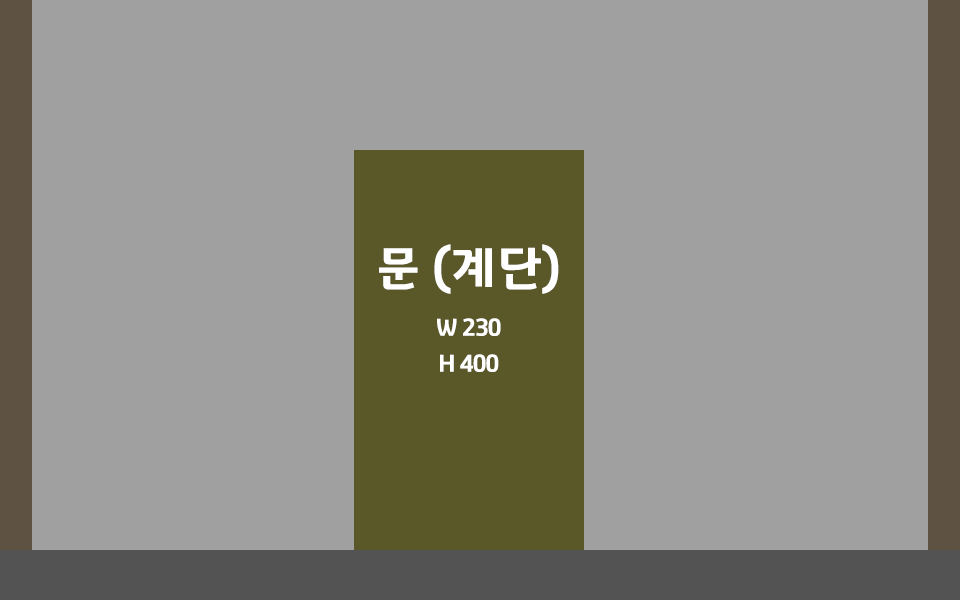
<style>
.page{position:relative;width:960px;height:600px;background:#a0a0a0}
.page>*{position:absolute;margin:0}
.t1{font:24px/36px "GyeonggiTitleV";letter-spacing:-0.05em;color:#ffffff}
.t2{font:48px/36px "GyeonggiTitleV";letter-spacing:-0.05em;color:#ffffff}
</style>
<div class="page">
<p class="t1" style="left:379px;top:244px;width:180px;height:128px;text-align:center"><span class="t2">문 (계단)<br><br></span>W 230<br>H 400</p>
</div>
